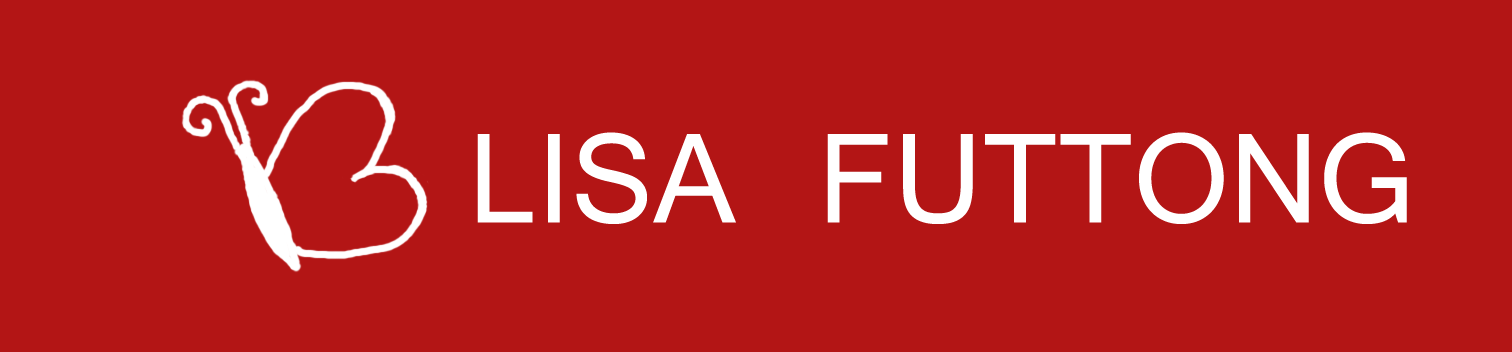
<style>
.page{position:relative;width:1512px;height:352px;background:#b31515}
.page>*{position:absolute;margin:0}
.t1{font:137.5px "Vrinda";color:#ffffff}
</style>
<div class="page">
<p class="t1" style="left:477px;top:132px;width:930px;height:92px">LISA FUTTONG</p>
</div>
